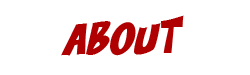
<style>
.page{position:relative;width:250px;height:75px;background:#ffffff}
.page>*{position:absolute;margin:0}
.t1{font:50px "HoustonComicsPersonalUse";color:#af0101}
</style>
<div class="page">
<p class="t1" style="left:61px;top:15px;width:123px;height:41px">ABOUT</p>
</div>
